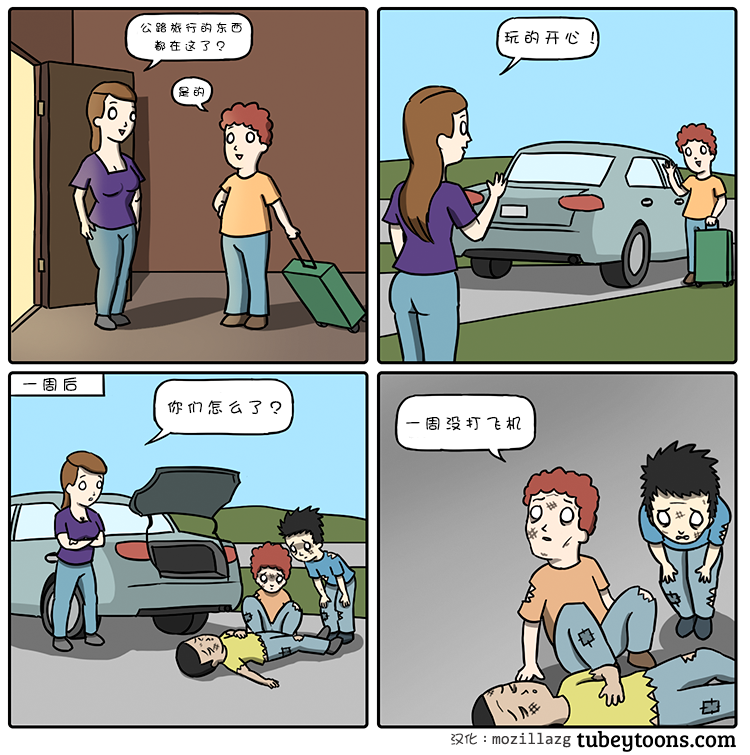
<style>
.page{position:relative;width:750px;height:755px}
.page>*{position:absolute;margin:0}
.t1{font:12px/18px "DFGirl";letter-spacing:0.26em;color:#000000}
.t2{font:16px "DFGirl";letter-spacing:0.26em;color:#000000}
.t3{font:12px "DFGirl";letter-spacing:0.26em;color:#000000}
</style>
<div class="page">
<p class="t1" style="left:140px;top:22px;width:102px;height:29px">公路旅行的东西<br>  都在这了？</p>
<p class="t2" style="left:504px;top:30px;width:91px;height:15px">玩的开心！</p>
<p class="t3" style="left:178px;top:86px;width:26px;height:11px">是的</p>
<p class="t2" style="left:23px;top:377px;width:54px;height:14px">一周后</p>
<p class="t2" style="left:167px;top:400px;width:115px;height:15px">你们怎么了？</p>
<p class="t2" style="left:406px;top:416px;width:115px;height:15px">一周没打飞机</p>
</div>
